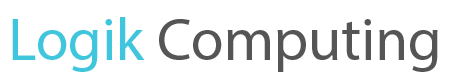
<style>
.page{position:relative;width:450px;height:80px;background:#ffffff}
.page>*{position:absolute;margin:0}
.t1{font:60px "MyriadPro-Regular";color:#555555}
.t2{font:60px "MyriadPro-Regular";color:#3fc5dc}
</style>
<div class="page">
<p class="t1" style="left:12px;top:17px;width:426px;height:55px"><span class="t2">Logik</span> Computing</p>
</div>
